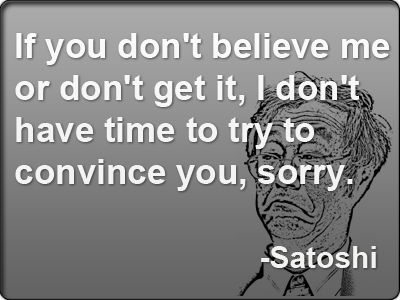
<style>
.page{position:relative;width:400px;height:300px}
.page>*{position:absolute;margin:0}
.t1{font:35px "Arial-BoldMT";color:#f5f5f5}
.t2{font:30px "Arial-BoldMT";color:#f5f5f5}
</style>
<div class="page">
<p class="t1" style="left:15px;top:33px;width:375px;height:235px">If you don't believe me<br>or don't get it, I don't<br>have time to try to<br>convince you, sorry.<br><br>         <span class="t2">-Satoshi</span></p>
</div>
